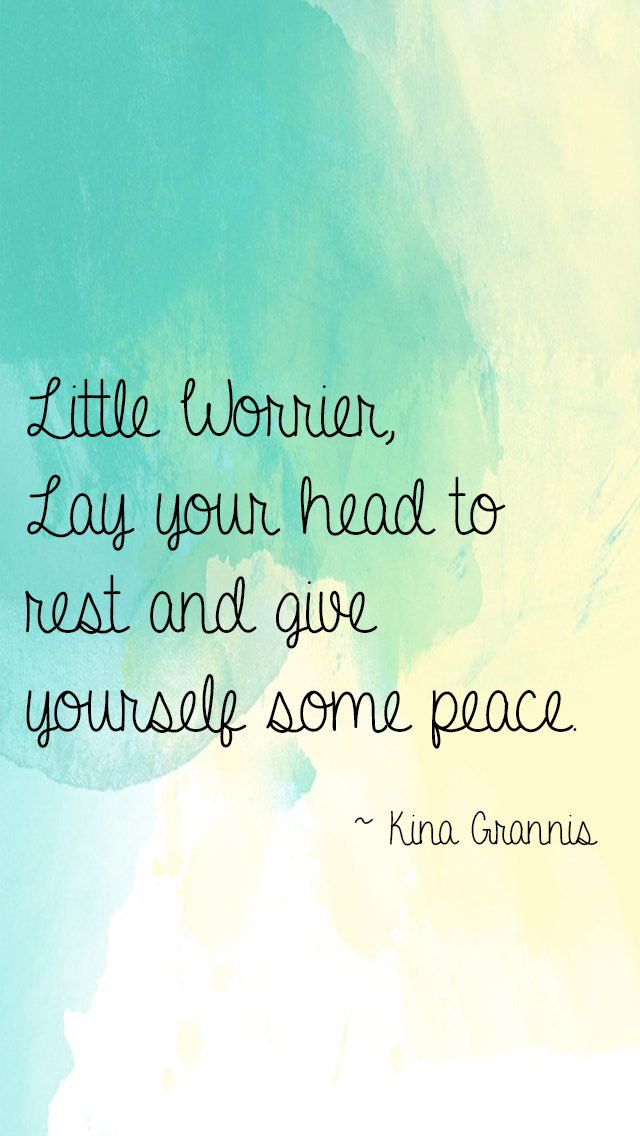
<style>
.page{position:relative;width:640px;height:1136px}
.page>*{position:absolute;margin:0}
.t1{font:82px "A-Gentle-Touch";color:#000000}
.t2{font:47px "A-Gentle-Touch";color:#000000}
</style>
<div class="page">
<p class="t1" style="left:25px;top:376px;width:573px;height:470px">Little Worrier, <br>Lay your head to rest and give    yourself some peace. <br>       <span class="t2">~ Kina Grannis</span></p>
</div>
